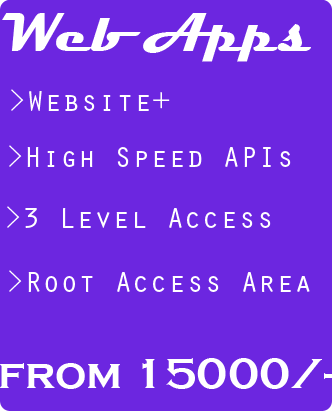
<style>
.page{position:relative;width:332px;height:411px;background:#6c26e0}
.page>*{position:absolute;margin:0}
.t1{font:56px "Magneto-Bold";color:#ffffff}
.t2{font:30px "OratorStd";color:#ffffff}
.t3{font:44px "CopperplateGothic-Bold";color:#ffffff}
</style>
<div class="page">
<p class="t1" style="left:2px;top:13px;width:309px;height:49px">Web Apps</p>
<p class="t2" style="left:11px;top:89px;width:159px;height:22px">&gt;Website+</p>
<p class="t2" style="left:9px;top:145px;width:282px;height:22px">&gt;High Speed APIs</p>
<p class="t2" style="left:7px;top:206px;width:264px;height:22px">&gt;3 Level Access</p>
<p class="t2" style="left:9px;top:270px;width:301px;height:22px">&gt;Root Access Area</p>
<p class="t3" style="left:0px;top:358px;width:332px;height:31px">from 15000/-</p>
</div>
